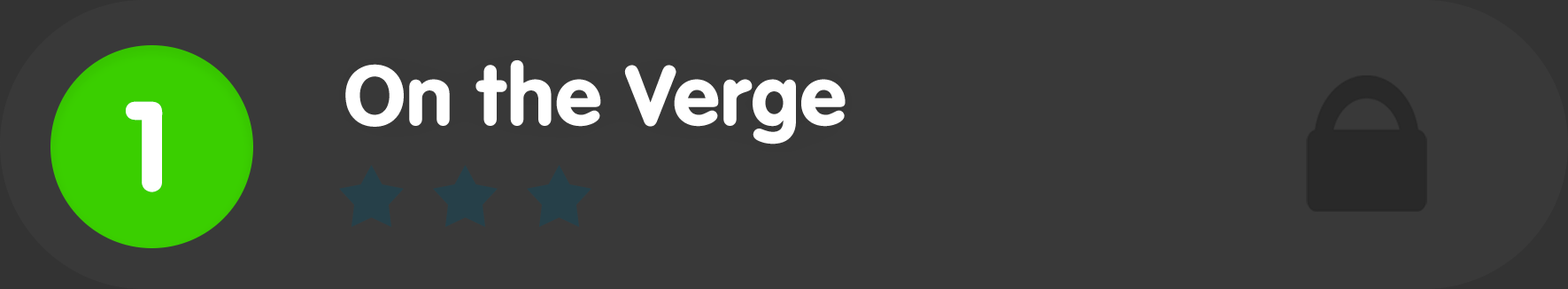
<style>
.page{position:relative;width:1568px;height:289px;background:#393939}
.page>*{position:absolute;margin:0}
.t1{font:88.5px "VAGRundschriftD";color:#ffffff}
.t2{font:132.8px "VAGRundschriftD";color:#ffffff}
</style>
<div class="page">
<p class="t1" style="left:345px;top:59px;width:501px;height:85px">On the Verge</p>
<p class="t2" style="left:126px;top:101px;width:37px;height:91px">1</p>
</div>
